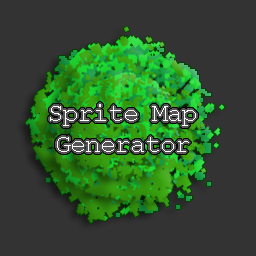
<style>
.page{position:relative;width:256px;height:256px;background:#333333}
.page>*{position:absolute;margin:0}
.t1{font:26.3px "CourierNewPSMT";color:#ffffff}
</style>
<div class="page">
<p class="t1" style="left:50px;top:104px;width:146px;height:48px;text-align:center">Sprite Map<br>Generator</p>
</div>
